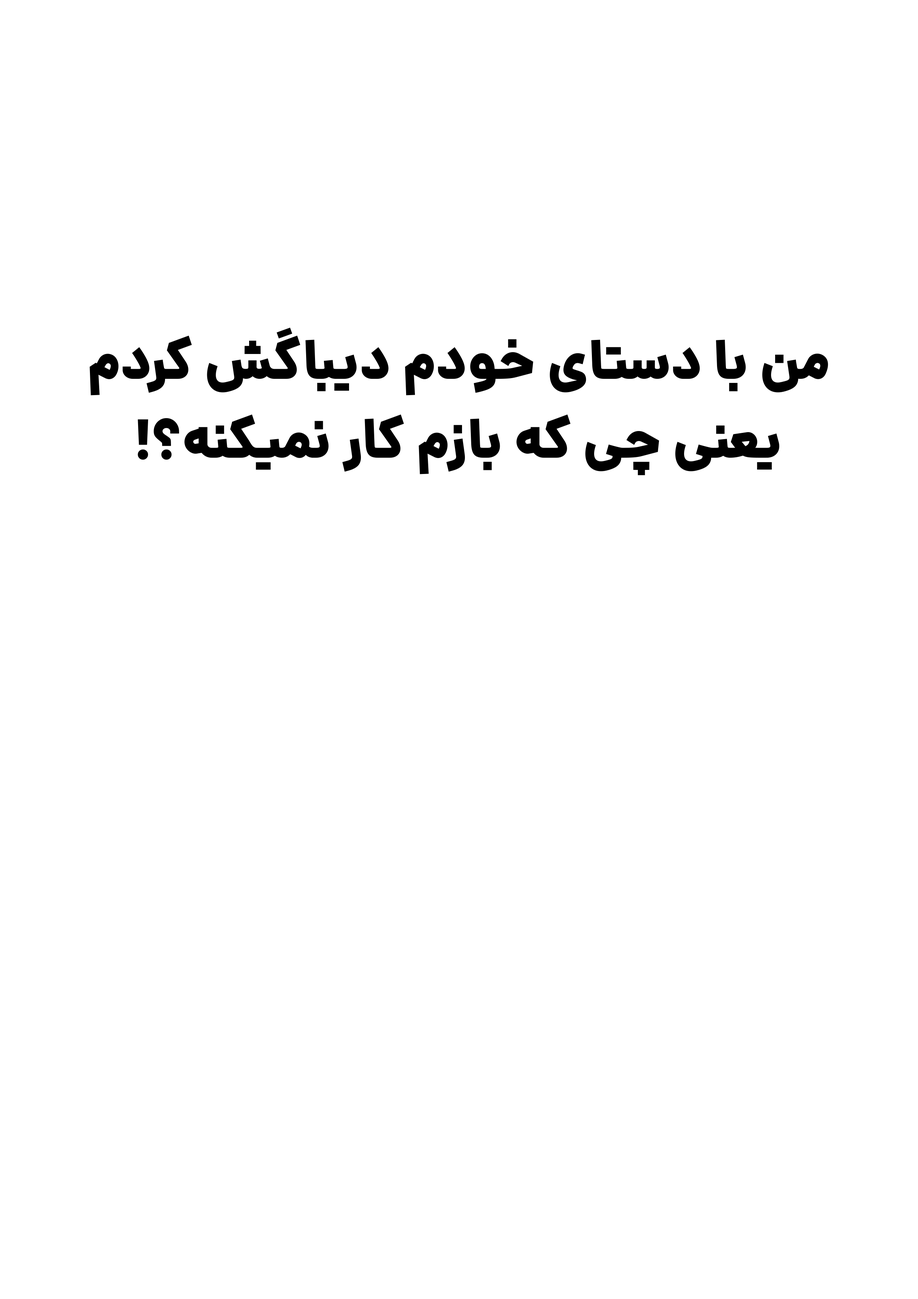
<style>
.page{position:relative;width:918px;height:1299px;background:#ffffff}
.page>*{position:absolute;margin:0}
.t1{font:54.7px/78.9px "Dana-Black";color:#000000}
</style>
<div class="page">
<p class="t1" style="left:90px;top:327px;width:738px;height:148px;text-align:center">من با دستای خودم دیباگش کردم<br>یعنی چی که بازم کار نمیکنه؟!</p>
</div>
